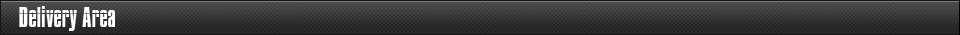
<style>
.page{position:relative;width:960px;height:35px}
.page>*{position:absolute;margin:0}
.t1{font:25px "Impossible";color:#ffffff}
</style>
<div class="page">
<p class="t1" style="left:19px;top:6px;width:97px;height:25px">Delivery Area</p>
</div>
